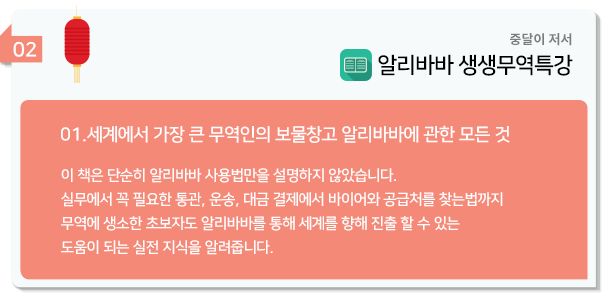
<style>
.page{position:relative;width:610px;height:300px;background:#f58978}
.page>*{position:absolute;margin:0}
.t1{font:20px "NanumSquare_acB";color:#ffffff}
.t2{font:13px "NotoSansKR-Bold";color:#7d7d7d}
.t3{font:22px "NanumSquare_acB";color:#000000}
.t4{font:18px "NanumSquare_acB";color:#fffefe}
.t5{font:15px/24px "NanumSquare_acB";color:#fffefe}
</style>
<div class="page">
<p class="t1" style="left:13px;top:41px;width:24px;height:16px">02</p>
<p class="t2" style="left:510px;top:33px;width:62px;height:13px">중달이 저서</p>
<p class="t3" style="left:378px;top:54px;width:195px;height:22px">알리바바 생생무역특강</p>
<p class="t4" style="left:61px;top:125px;width:449px;height:18px">01.세계에서 가장 큰 무역인의 보물창고 알리바바에 관한 모든 것</p>
<p class="t5" style="left:61px;top:168px;width:442px;height:87px">이 책은 단순히 알리바바 사용법만을 설명하지 않았습니다.<br>실무에서 꼭 필요한 통관, 운송, 대금 결제에서 바이어와 공급처를 찾는법까지<br>무역에 생소한 초보자도 알리바바를 통해 세계를 향해 진출 할 수 있는<br>도움이 되는 실전 지식을 알려줍니다.</p>
</div>
